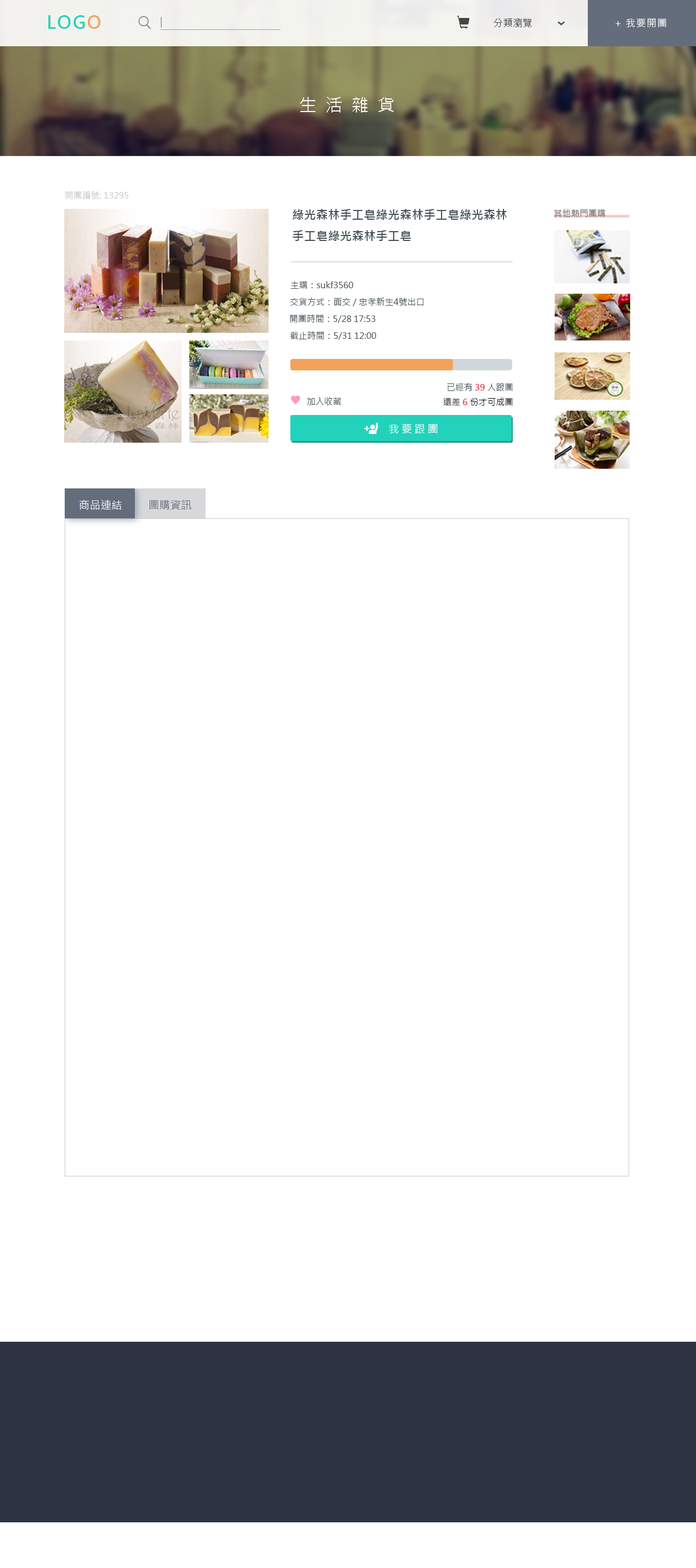
<style>
.page{position:relative;width:696px;height:1568px;background:#ffffff}
.page>*{position:absolute;margin:0}
.t1{font:17.4px "MicrosoftJhengHeiBold";letter-spacing:0.075em;color:#22d2bb}
.t2{font:17.4px "MicrosoftJhengHeiBold";letter-spacing:0.075em;color:#f2a359}
.t3{font:9.8px "MicrosoftJhengHeiRegular";color:#393939}
.t4{font:9.8px "MicrosoftJhengHeiRegular";letter-spacing:0.075em;color:#fefeff}
.t5{font:17.4px "MicrosoftJhengHeiRegular";letter-spacing:0.5em;color:#ffffff}
.t6{font:8.7px "MicrosoftJhengHeiRegular";color:#cccccc}
.t7{font:12px "MicrosoftJhengHeiBold";color:#424f55}
.t8{font:8.7px "MicrosoftJhengHeiRegular";color:#626262}
.t9{font:8.7px "MicrosoftJhengHeiRegular";color:#424f55}
.t10{font:8.7px/14.7px "MicrosoftJhengHeiRegular";color:#000000}
.t11{font:8.7px/14.7px "MicrosoftJhengHeiRegular";color:#424f55}
.t12{font:8.7px/14.7px "MicrosoftJhengHeiBold";color:#e8334d}
.t13{font:10.9px "MicrosoftJhengHeiRegular";letter-spacing:0.2em;color:#ffffff}
.t14{font:10.9px "MicrosoftJhengHeiRegular";color:#ffffff}
.t15{font:10.9px "MicrosoftJhengHeiRegular";color:#646d7c}
</style>
<div class="page">
<p class="t1" style="left:48px;top:15px;width:53px;height:14px">LOG<span class="t2">O</span></p>
<p class="t3" style="left:494px;top:18px;width:38px;height:9px">分類瀏覽</p>
<p class="t4" style="left:616px;top:18px;width:50px;height:9px">+ 我要開團</p>
<p class="t5" style="left:300px;top:97px;width:94px;height:16px">生活雜貨</p>
<p class="t6" style="left:65px;top:191px;width:63px;height:8px">開團編號: 13295</p>
<p class="t7" style="left:293px;top:209px;width:214px;height:32px">綠光森林手工皂綠光森林手工皂綠光森林<br>手工皂綠光森林手工皂</p>
<p class="t8" style="left:554px;top:209px;width:52px;height:8px">其他熱門團購</p>
<p class="t9" style="left:290px;top:281px;width:64px;height:8px">主購：sukf3560</p>
<p class="t9" style="left:290px;top:298px;width:134px;height:8px">交貨方式：面交 / 忠孝新生4號出口</p>
<p class="t9" style="left:290px;top:314px;width:86px;height:9px">開團時間：5/28 17:53</p>
<p class="t9" style="left:290px;top:331px;width:86px;height:9px">截止時間：5/31 12:00</p>
<p class="t10" style="left:443px;top:383px;width:70px;height:23px;text-align:right"><span class="t11">已經有 </span><span class="t12">39 </span><span class="t11">人跟團<br></span>還差 <span class="t12">6</span> 份才可成團</p>
<p class="t9" style="left:307px;top:397px;width:35px;height:8px">加入收藏</p>
<p class="t13" style="left:389px;top:424px;width:49px;height:9px">我要跟團</p>
<p class="t14" style="left:79px;top:500px;width:43px;height:10px">商品連結</p>
<p class="t15" style="left:149px;top:500px;width:42px;height:10px">團購資訊</p>
</div>
